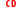
<style>
.page{position:relative;width:16px;height:16px;background:#ffffff}
.page>*{position:absolute;margin:0}
.t1{font:10px "MyriadPro-BoldCond";color:#fe0006}
</style>
<div class="page">
<p class="t1" style="left:6px;top:0px;width:10px;height:7px">C D</p>
</div>
